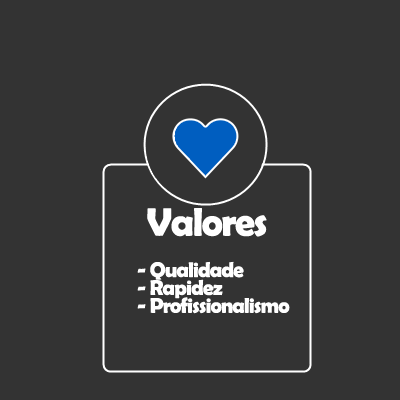
<style>
.page{position:relative;width:400px;height:400px;background:#333333}
.page>*{position:absolute;margin:0}
.t1{font:40px "BerlinSansFBDemi-Bold";letter-spacing:-0.04em;color:#ffffff}
.t2{font:21.3px/17.9px "BerlinSansFBDemi-Bold";letter-spacing:-0.04em;color:#ffffff}
</style>
<div class="page">
<p class="t1" style="left:147px;top:208px;width:120px;height:29px">Valores</p>
<p class="t2" style="left:137px;top:261px;width:153px;height:53px">- Qualidade<br>- Rapidez<br>- Profissionalismo</p>
</div>
